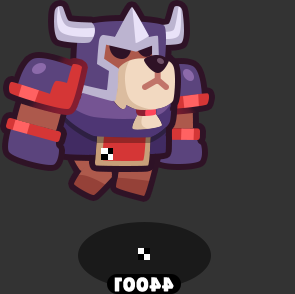
<style>
.page{position:relative;width:295px;height:294px;background:#333333}
.page>*{position:absolute;margin:0}
.t1{font:19.9px "LilitaOne";color:#ffffff;font-weight:bold}
</style>
<div class="page">
<p class="t1" style="left:114px;top:277px;width:60px;height:15px;rotate:180deg">44001</p>
</div>
